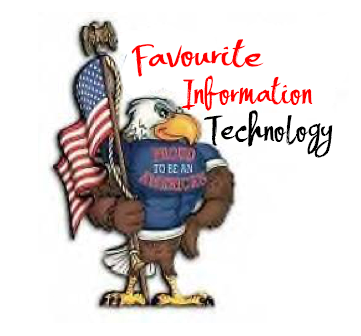
<style>
.page{position:relative;width:361px;height:336px;background:#ffffff}
.page>*{position:absolute;margin:0}
.t1{font:48px "Handsome";color:#ff0000}
.t2{font:48px "Handsome";color:#000000}
</style>
<div class="page">
<p class="t1" style="left:131px;top:39px;width:133px;height:38px">Favourite</p>
<p class="t1" style="left:181px;top:75px;width:132px;height:36px">Information</p>
<p class="t2" style="left:204px;top:110px;width:129px;height:48px">Technology</p>
</div>
